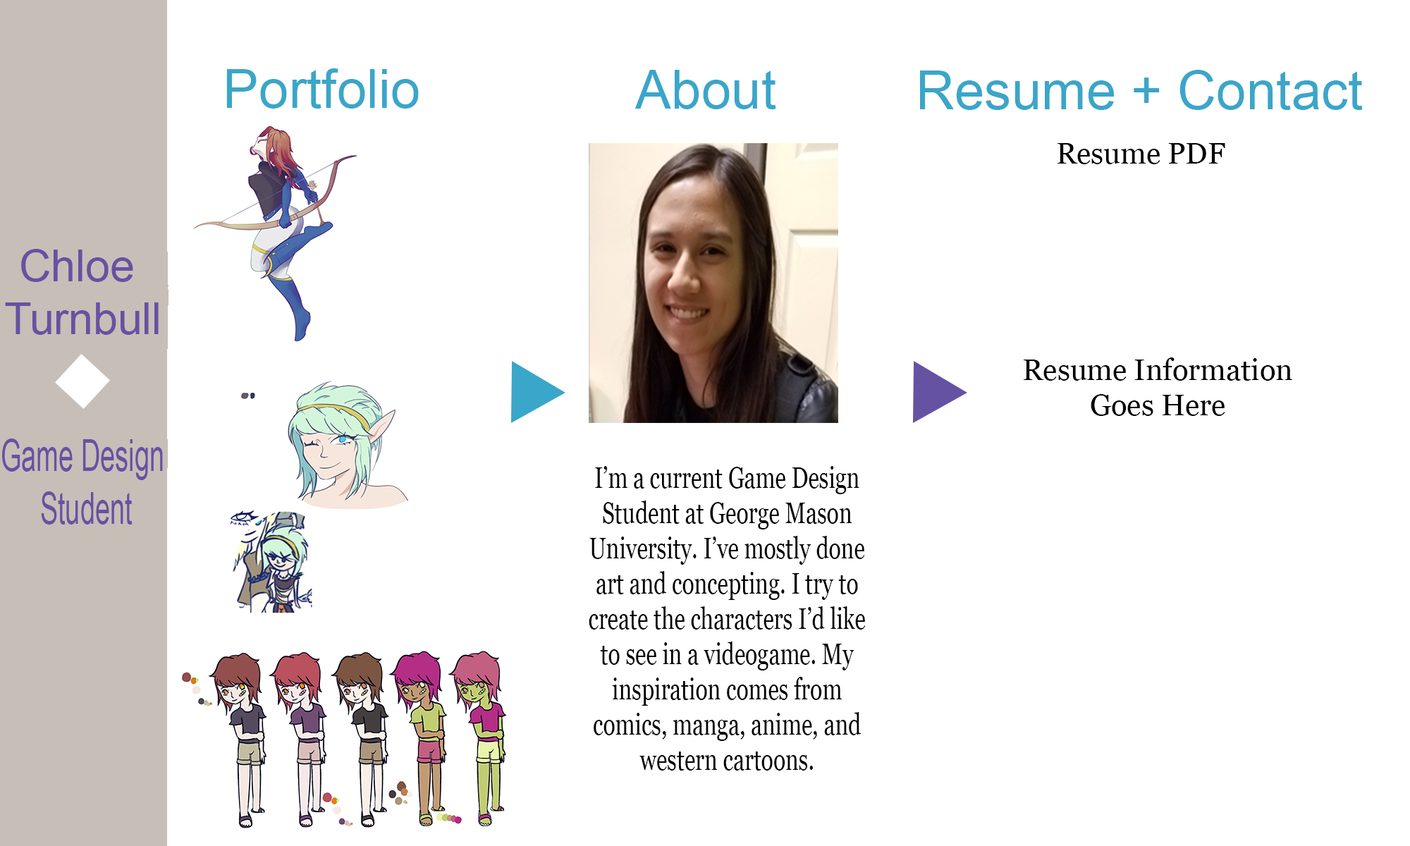
<style>
.page{position:relative;width:1410px;height:846px;background:#ffffff}
.page>*{position:absolute;margin:0}
.t1{font:53.8px "ArialMT";color:#3aa6c9}
.t2{font:29.4px "Georgia";color:#000000}
.t3{font:44.1px "ArialMT";color:#6652a2}
.t4{font:44.1px "ArialMT";color:#6652a2;scale:0.61 1}
.t5{font:29.4px "Georgia";color:#000000;scale:0.76 1}
</style>
<div class="page">
<p class="t1" style="left:226px;top:68px;width:193px;height:41px">Portfolio</p>
<p class="t1" style="left:634px;top:70px;width:142px;height:39px">About</p>
<p class="t1" style="left:920px;top:70px;width:443px;height:40px">Resume + Contact</p>
<p class="t2" style="left:1057px;top:143px;width:168px;height:21px">Resume PDF</p>
<p class="t3" style="left:5px;top:249px;width:154px;height:86px;text-align:center">Chloe <br>Turnbull</p>
<p class="t2" style="left:1023px;top:357px;width:269px;height:59px;text-align:center">Resume Information<br>Goes Here</p>
<p class="t4" style="left:2px;top:438px;width:161px;height:86px;text-align:center">Game Design <br>Student</p>
<p class="t5" style="left:589px;top:466px;width:277px;height:304px;text-align:center">I’m a current Game Design<br>Student at George Mason<br>University. I’ve mostly done<br>art and concepting. I try to<br>create the characters I’d like<br>to see in a videogame. My<br>inspiration comes from<br>comics, manga, anime, and<br>western cartoons.</p>
</div>
